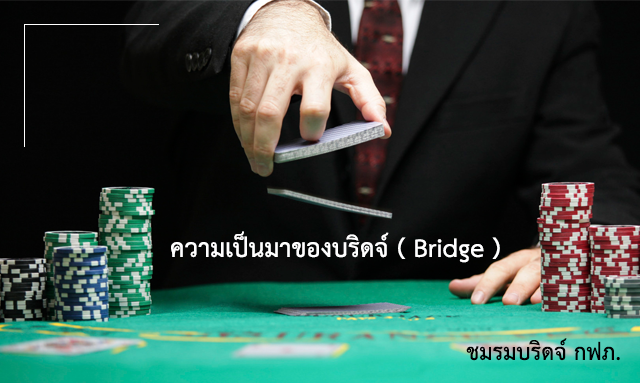
<style>
.page{position:relative;width:640px;height:383px}
.page>*{position:absolute;margin:0}
.t1{font:36px "THSarabunNew-Bold";color:#ffffff}
.t2{font:32px "THSarabunNew-Bold";color:#010101}
</style>
<div class="page">
<p class="t1" style="left:171px;top:231px;width:329px;height:32px">ความเป็นมาของบริดจ์ ( Bridge )</p>
<p class="t2" style="left:466px;top:338px;width:154px;height:23px">ชมรมบริดจ์ กฟภ.</p>
</div>
